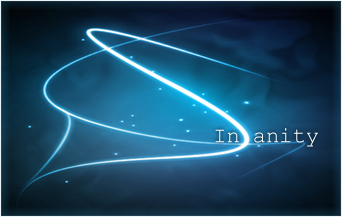
<style>
.page{position:relative;width:342px;height:217px}
.page>*{position:absolute;margin:0}
.t1{font:22px "CourierNewPSMT";color:#ffffff}
</style>
<div class="page">
<p class="t1" style="left:215px;top:128px;width:103px;height:19px">In anity</p>
</div>
